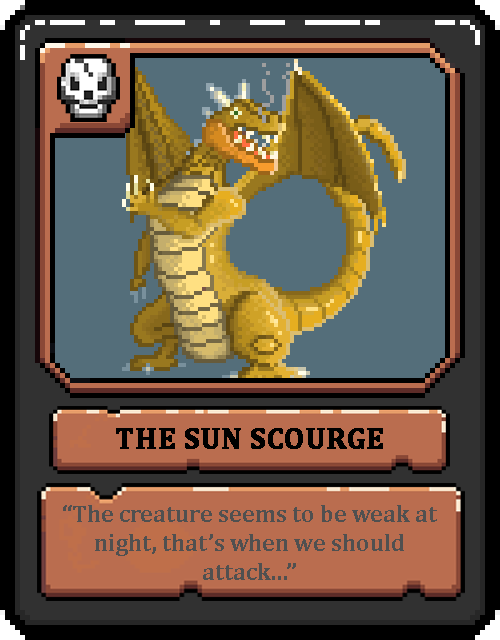
<style>
.page{position:relative;width:500px;height:640px;background:#546e7a}
.page>*{position:absolute;margin:0}
.t1{font:30px "Cambria-Bold";color:#000000;text-transform:uppercase;font-weight:bold}
.t2{font:24px "Cambria-Bold";color:#505050}
</style>
<div class="page">
<p class="t1" style="left:116px;top:428px;width:267px;height:21px">The Sun Scourge</p>
<p class="t2" style="left:63px;top:505px;width:374px;height:75px;text-align:center">“The creature seems to be weak at night, that’s when we should attack...”</p>
</div>
